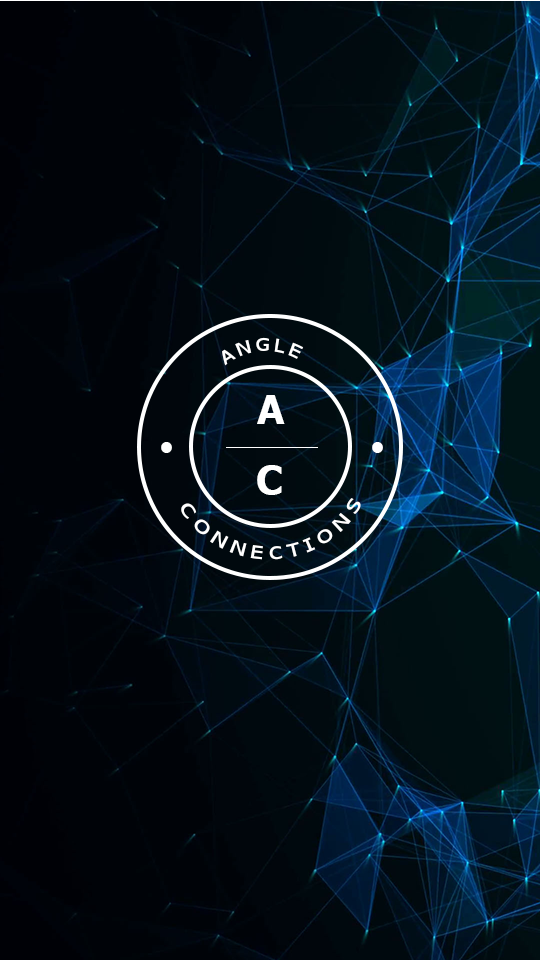
<style>
.page{position:relative;width:540px;height:960px;background:#000308}
.page>*{position:absolute;margin:0}
.t1{font:18px "Tahoma";letter-spacing:0.2em;color:#ffffff}
.t2{font:40px "Tahoma-Bold";letter-spacing:0.2em;color:#ffffff}
.t3{font:72px "Athelas-Bold";letter-spacing:0.2em;color:#ffffff}
</style>
<div class="page">
<p class="t1" style="left:222px;top:337px;width:82px;height:29px;rotate:-3deg">ANGLE</p>
<p class="t2" style="left:257px;top:395px;width:28px;height:29px">A</p>
<p class="t3" style="left:161px;top:442px;width:11px;height:11px">.</p>
<p class="t3" style="left:372px;top:442px;width:11px;height:11px">.</p>
<p class="t2" style="left:257px;top:465px;width:25px;height:30px">C</p>
<p class="t1" style="left:181px;top:498px;width:180px;height:62px;rotate:-3deg">CONNECTIONS</p>
</div>
